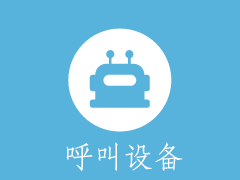
<style>
.page{position:relative;width:240px;height:180px;background:#57b3dc}
.page>*{position:absolute;margin:0}
.t1{font:30px "STFangsong";color:#fdfcfc}
</style>
<div class="page">
<p class="t1" style="left:66px;top:142px;width:117px;height:29px">呼叫设备</p>
</div>
